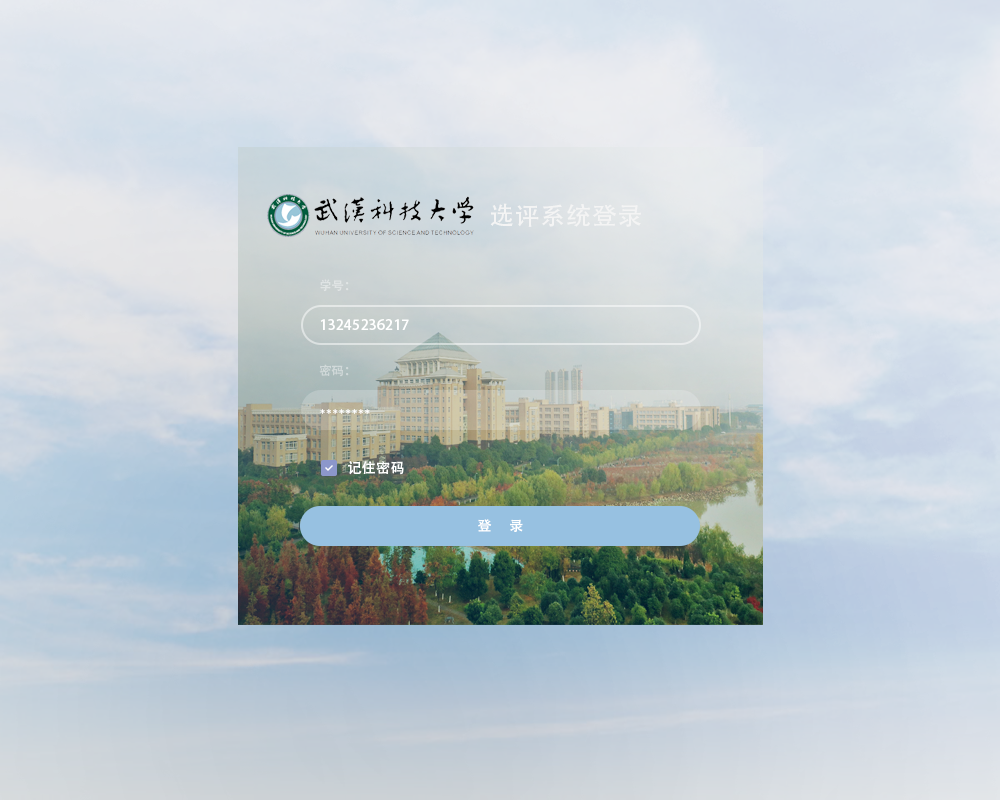
<style>
.page{position:relative;width:1000px;height:800px}
.page>*{position:absolute;margin:0}
.t1{font:25px "AdobeHeitiStd-Regular";letter-spacing:0.025em;color:#f4f4f4;text-transform:uppercase}
.t2{font:12px "AdobeHeitiStd-Regular";letter-spacing:0.025em;color:#e0e4e4;text-transform:uppercase}
.t3{font:14px "AdobeHeitiStd-Regular";letter-spacing:0.025em;color:#ffffff}
.t4{font:12px "AdobeHeitiStd-Regular";letter-spacing:0.025em;color:#d0d8d8;text-transform:uppercase}
.t5{font:14px "Montserrat-Regular";letter-spacing:0.025em;color:#ffffff}
.t6{font:14px "AdobeHeitiStd-Regular";letter-spacing:0.025em;color:#ffffff;text-transform:uppercase}
</style>
<div class="page">
<p class="t1" style="left:490px;top:203px;width:151px;height:24px">选评系统登录</p>
<p class="t2" style="left:320px;top:279px;width:29px;height:13px">学号：</p>
<p class="t3" style="left:320px;top:319px;width:89px;height:11px">13245236217</p>
<p class="t4" style="left:319px;top:364px;width:30px;height:13px">密码：</p>
<p class="t5" style="left:320px;top:409px;width:50px;height:5px">********</p>
<p class="t3" style="left:348px;top:461px;width:56px;height:14px">记住密码</p>
<p class="t6" style="left:478px;top:519px;width:45px;height:13px">登     录</p>
</div>
